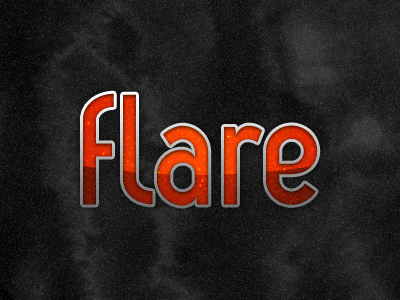
<style>
.page{position:relative;width:400px;height:300px}
.page>*{position:absolute;margin:0}
.t1{font:161px "ZagBold"}
</style>
<div class="page">
<p class="t1" style="left:83px;top:93px;width:235px;height:113px">flare</p>
</div>
